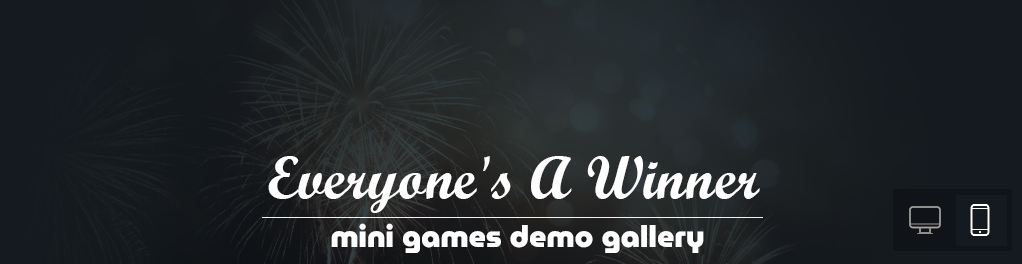
<style>
.page{position:relative;width:1022px;height:264px}
.page>*{position:absolute;margin:0}
.t1{font:60px "ScriptMTBold";color:#ffffff}
.t2{font:30px "MuseoModerno-Black";color:#ffffff}
</style>
<div class="page">
<p class="t1" style="left:268px;top:156px;width:492px;height:57px">Everyone's A Winner</p>
<p class="t2" style="left:331px;top:223px;width:373px;height:30px">mini games demo gallery</p>
</div>
